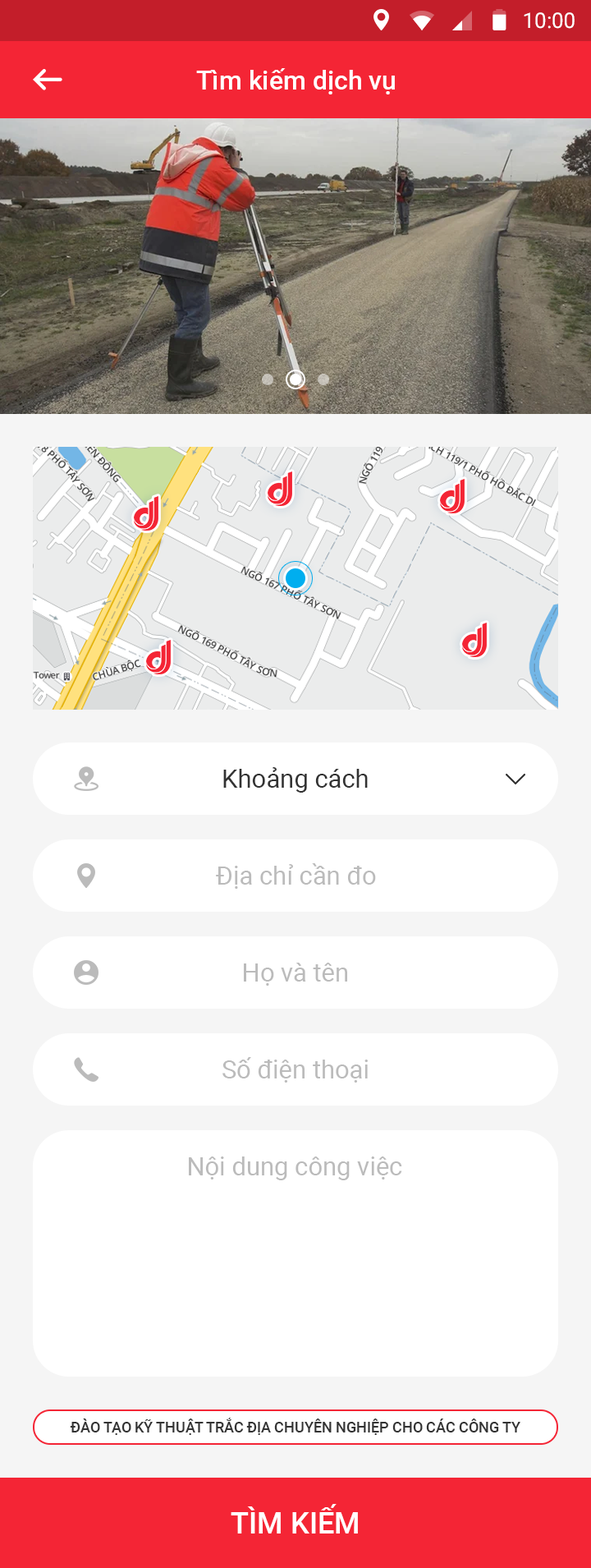
<style>
.page{position:relative;width:591px;height:1568px;background:#ffffff}
.page>*{position:absolute;margin:0}
.t1{font:21.4px "Roboto-Regular";color:#ffffff}
.t2{font:26.3px "Roboto-Medium";color:#ffffff}
.t3{font:25.5px "Roboto-Regular";color:#333333}
.t4{font:25.5px "Roboto-Regular";color:#bbbbbb}
.t5{font:14.8px "Roboto-Medium";color:#333333;text-transform:uppercase}
.t6{font:29.6px "Roboto-Medium";color:#ffffff;text-transform:uppercase}
</style>
<div class="page">
<p class="t1" style="left:524px;top:12px;width:51px;height:17px">10:00</p>
<p class="t2" style="left:196px;top:68px;width:199px;height:26px">Tìm kiếm dịch vụ</p>
<p class="t3" style="left:223px;top:767px;width:145px;height:26px">Khoảng cách</p>
<p class="t4" style="left:216px;top:863px;width:160px;height:26px">Địa chỉ cần đo</p>
<p class="t4" style="left:244px;top:963px;width:103px;height:23px">Họ và tên</p>
<p class="t4" style="left:223px;top:1057px;width:145px;height:26px">Số điện thoại</p>
<p class="t4" style="left:189px;top:1156px;width:213px;height:24px">Nội dung công việc</p>
<p class="t5" style="left:70px;top:1418px;width:451px;height:17px">đào tạo kỹ thuật trắc địa chuyên nghiệp cho các công ty</p>
<p class="t6" style="left:231px;top:1504px;width:127px;height:30px">tìm kiếm</p>
</div>
